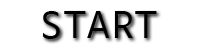
<style>
.page{position:relative;width:200px;height:50px;background:#ffffff}
.page>*{position:absolute;margin:0}
.t1{font:35.4px "NanumBarunGothic";letter-spacing:0.05em;color:#000000}
</style>
<div class="page">
<p class="t1" style="left:43px;top:11px;width:114px;height:28px">START</p>
</div>
